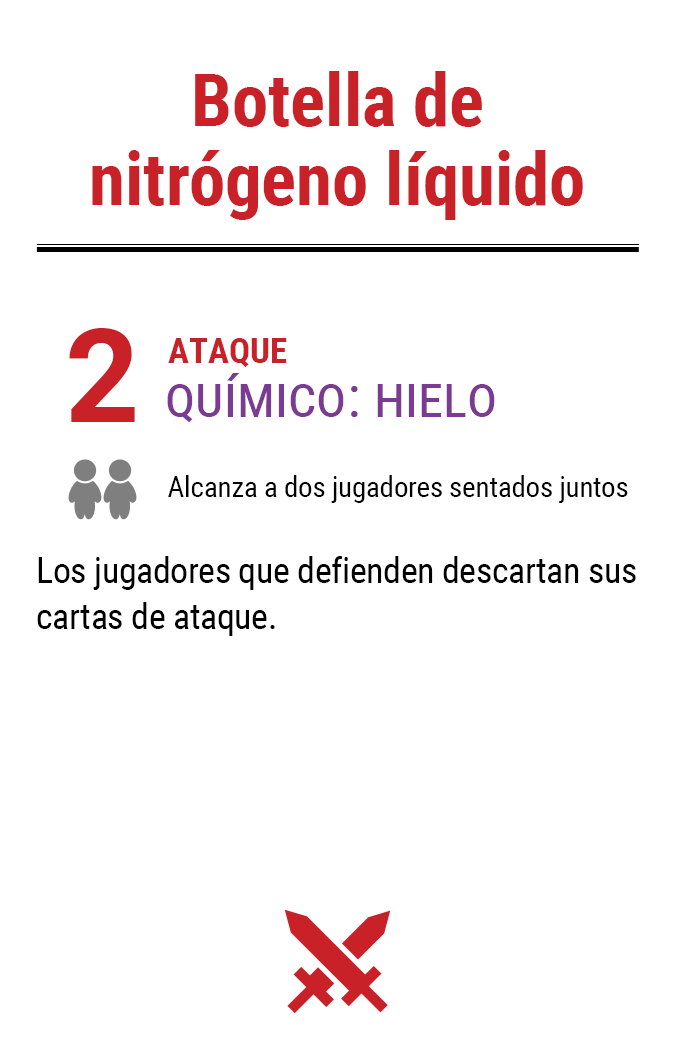
<style>
.page{position:relative;width:675px;height:1050px;background:#ffffff}
.page>*{position:absolute;margin:0}
.t1{font:72.9px/71.4px "RobotoCondensed-Bold";color:#c82127}
.t2{font:130px "Roboto-Bold";letter-spacing:-0.06em;color:#c82127}
.t3{font:35px "RobotoCondensed-Bold";color:#c82127}
.t4{font:58.3px "RobotoCondensed-Regular";color:#7c3b92;font-variant:small-caps}
.t5{font:29.2px "RobotoCondensed-Regular";letter-spacing:-0.01em;color:#000000}
.t6{font:35.8px/45.8px "RobotoCondensed-Regular";letter-spacing:-0.01em;color:#000000}
</style>
<div class="page">
<p class="t1" style="left:92px;top:71px;width:491px;height:149px;text-align:center">Botella de<br>nitrógeno líquido</p>
<p class="t2" style="left:69px;top:328px;width:66px;height:94px">2</p>
<p class="t3" style="left:168px;top:338px;width:119px;height:29px">ATAQUE</p>
<p class="t4" style="left:167px;top:373px;width:328px;height:50px">químico: hielo</p>
<p class="t5" style="left:168px;top:475px;width:460px;height:28px">Alcanza a dos jugadores sentados juntos</p>
<p class="t6" style="left:37px;top:556px;width:599px;height:80px">Los jugadores que defienden descartan sus cartas de ataque.</p>
</div>
